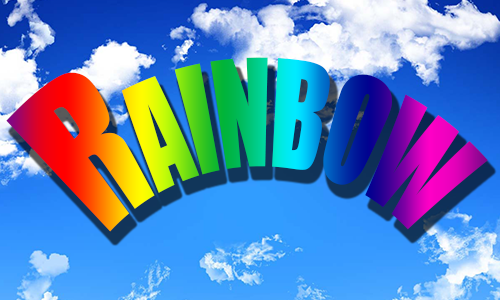
<style>
.page{position:relative;width:500px;height:300px}
.page>*{position:absolute;margin:0}
.t1{font:127.1px "Impact";letter-spacing:0.01em;font-variant:small-caps}
</style>
<div class="page">
<p class="t1" style="left:6px;top:57px;width:482px;height:175px">Rainbow</p>
</div>
